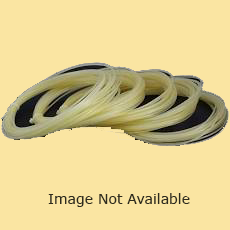
<style>
.page{position:relative;width:230px;height:230px;background:#fae5a2}
.page>*{position:absolute;margin:0}
.t1{font:14px "MSReferenceSansSerif";color:#2d2b1e}
</style>
<div class="page">
<p class="t1" style="left:48px;top:193px;width:142px;height:14px">Image Not Available</p>
</div>
